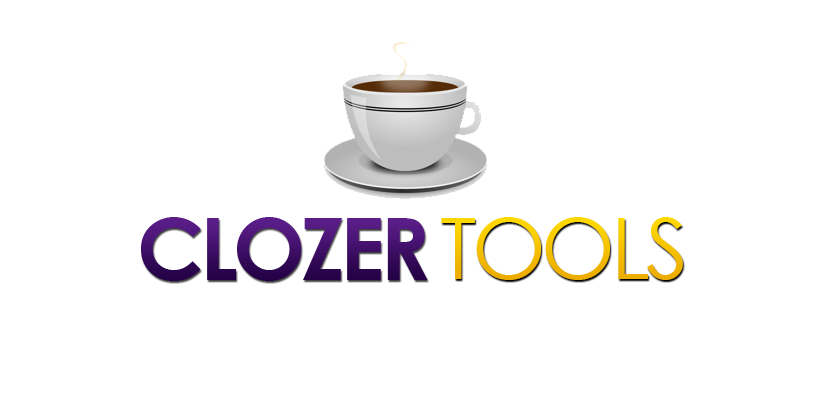
<style>
.page{position:relative;width:824px;height:398px;background:#ffffff}
.page>*{position:absolute;margin:0}
.t1{font:86.2px "CenturyGothic-Bold";letter-spacing:-0.05em}
.t2{font:85.4px "CenturyGothic";letter-spacing:-0.05em;color:#efb400}
</style>
<div class="page">
<p class="t1" style="left:141px;top:217px;width:287px;height:64px">CLOZER</p>
<p class="t2" style="left:441px;top:217px;width:242px;height:63px">TOOLS</p>
</div>
